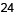
<style>
.page{position:relative;width:15px;height:15px;background:#ffffff}
.page>*{position:absolute;margin:0}
.t1{font:12px "ArialMT";color:#000000}
</style>
<div class="page">
<p class="t1" style="left:1px;top:3px;width:13px;height:9px">24</p>
</div>
